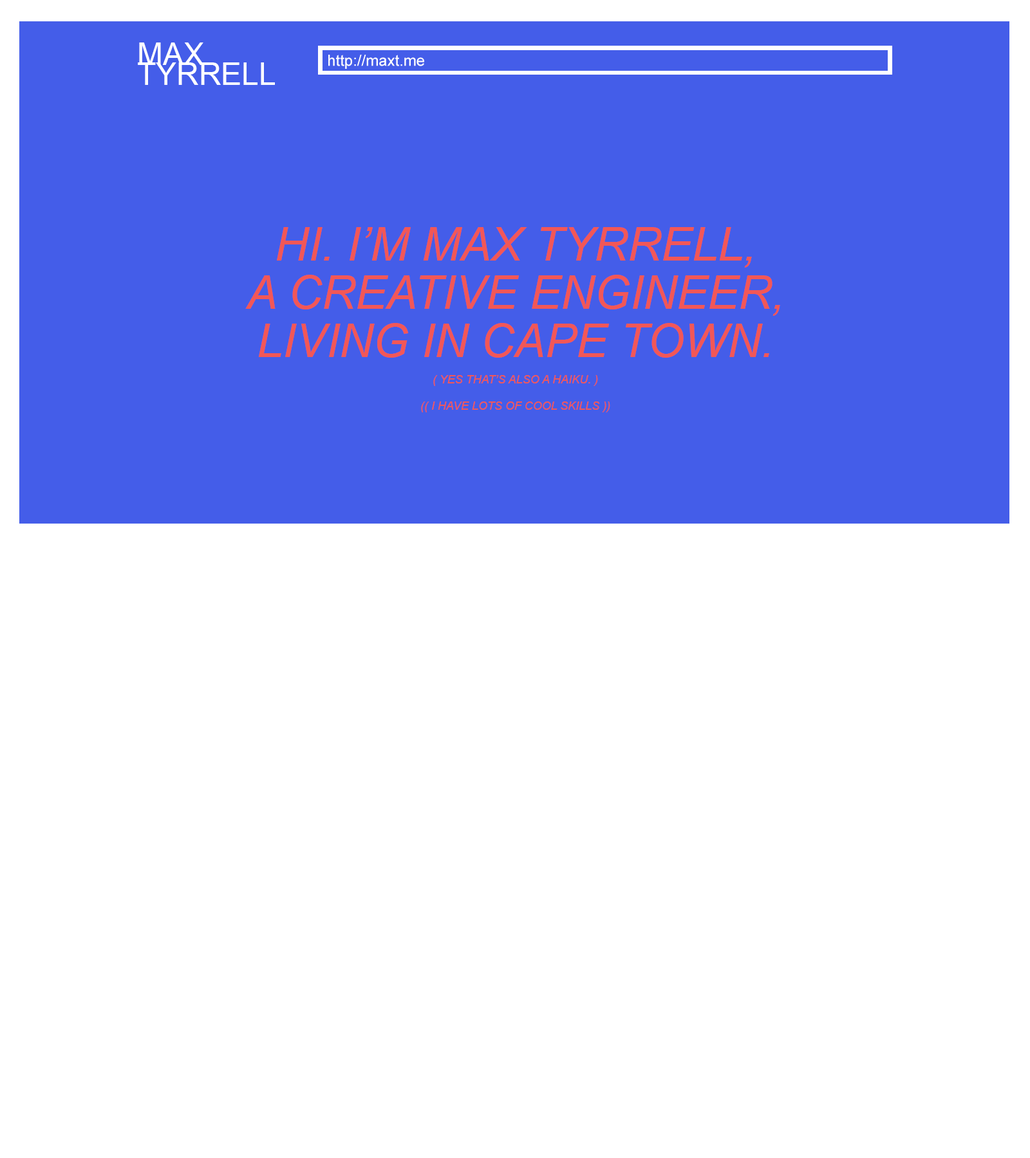
<style>
.page{position:relative;width:1030px;height:1158px;background:#ffffff}
.page>*{position:absolute;margin:0}
.t1{font:30.9px/19.9px "ArialMT";color:#fefeff}
.t2{font:15.4px "ArialMT";color:#fefeff}
.t3{font:46.3px/48.3px "Arial-ItalicMT";color:#f25757}
.t4{font:11.6px/26.4px "Arial-ItalicMT";color:#f25757}
</style>
<div class="page">
<p class="t1" style="left:138px;top:42px;width:137px;height:43px">MAX<br>TYRRELL</p>
<p class="t2" style="left:328px;top:55px;width:96px;height:14px">http://maxt.me</p>
<p class="t3" style="left:245px;top:227px;width:535px;height:185px;text-align:center">HI. I’M MAX TYRRELL,<br>A CREATIVE ENGINEER,<br>LIVING IN CAPE TOWN.<br><span class="t4">( YES THAT’S ALSO A HAIKU. )<br>(( I HAVE LOTS OF COOL SKILLS ))</span></p>
</div>
